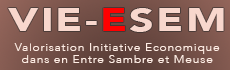
<style>
.page{position:relative;width:230px;height:70px}
.page>*{position:absolute;margin:0}
.t1{font:32px "Avenir-Black";letter-spacing:0.05em;color:#f8d7cd;scale:1.35 1}
.t2{font:32px "Avenir-Black";letter-spacing:0.05em;color:#ff0000;scale:1.35 1}
.t3{font:10px "Avenir-Light";letter-spacing:0.05em;color:#ffede4;scale:1.23 1}
</style>
<div class="page">
<p class="t1" style="left:8px;top:8px;width:216px;height:24px">VIE-<span class="t2">E</span>SEM</p>
<p class="t3" style="left:14px;top:43px;width:206px;height:20px;text-align:center">Valorisation Initiative Economique<br>dans en Entre Sambre et Meuse</p>
</div>
